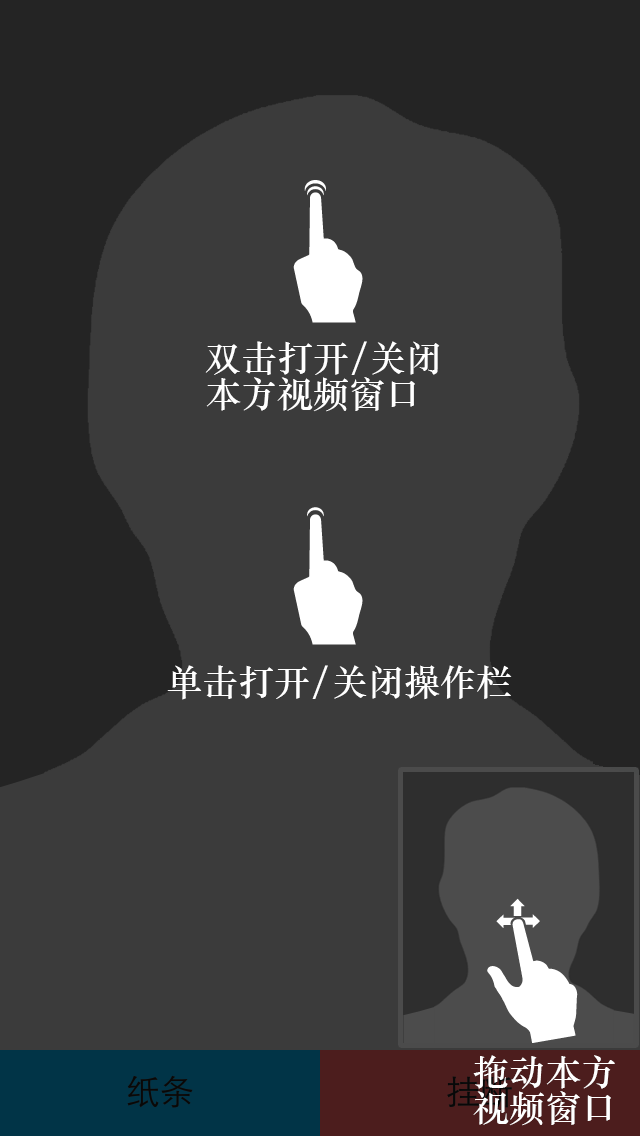
<style>
.page{position:relative;width:640px;height:1136px;background:#3b3b3b}
.page>*{position:absolute;margin:0}
.t1{font:36px/36px "STZhongsong";color:#ffffff}
.t2{font:36px "STZhongsong";color:#ffffff}
</style>
<div class="page">
<p class="t1" style="left:205px;top:341px;width:235px;height:71px">双击打开/关闭<br>本方视频窗口</p>
<p class="t2" style="left:167px;top:665px;width:345px;height:35px">单击打开/关闭操作栏</p>
<p class="t1" style="left:473px;top:1055px;width:142px;height:71px">拖动本方<br>视频窗口</p>
</div>
